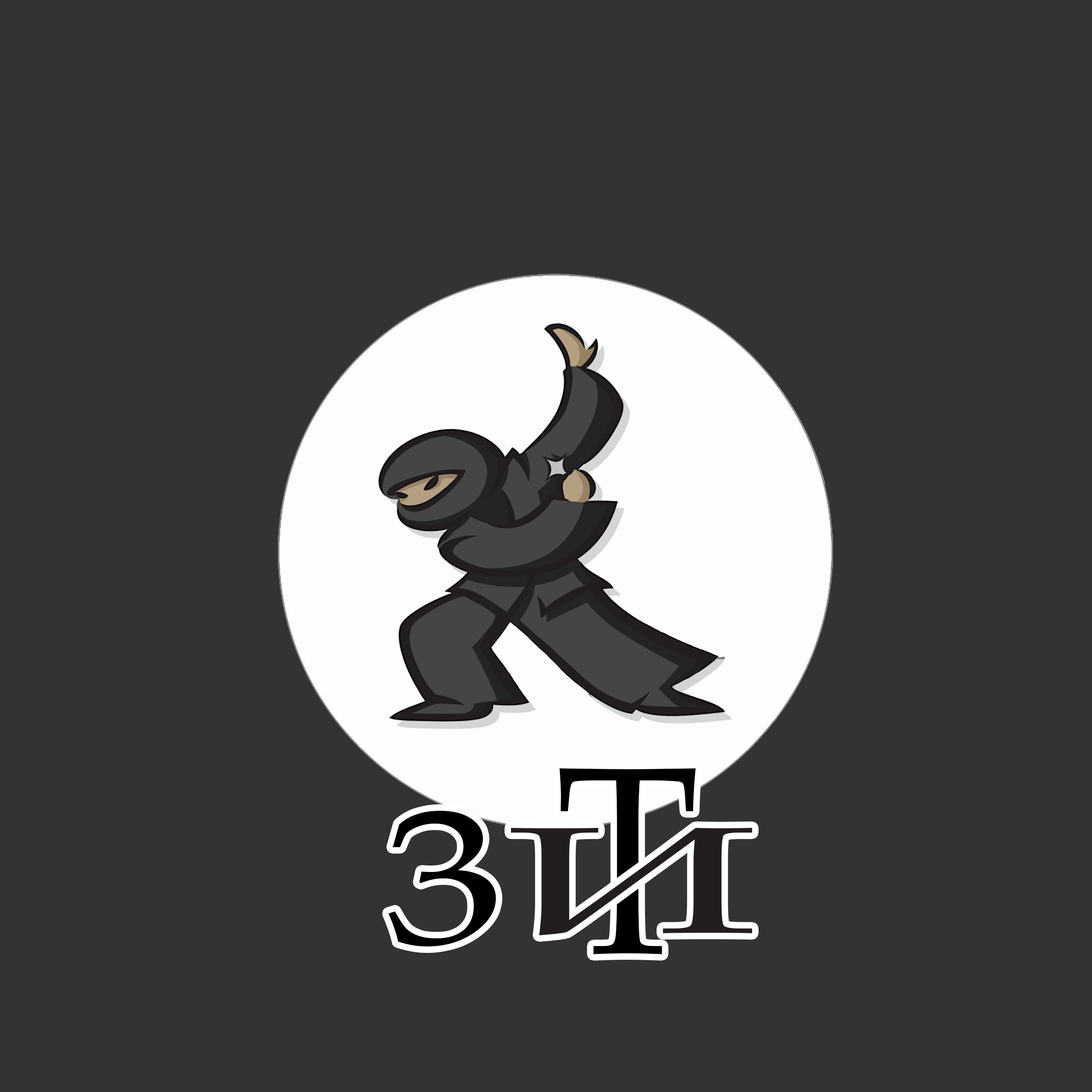
<style>
.page{position:relative;width:1092px;height:1092px;background:#333333}
.page>*{position:absolute;margin:0}
.t1{font:267.7px "BookAntiqua";color:#000000;scale:0.88 1}
.t2{font:190px "BookAntiqua";color:#000000;scale:1.27 1}
.t3{font:151.6px "BookAntiqua";color:#221e1f;scale:2.01 1}
</style>
<div class="page">
<p class="t1" style="left:559px;top:768px;width:137px;height:186px">Т</p>
<p class="t2" style="left:388px;top:811px;width:108px;height:135px">3</p>
<p class="t3" style="left:511px;top:828px;width:241px;height:107px">И</p>
</div>
